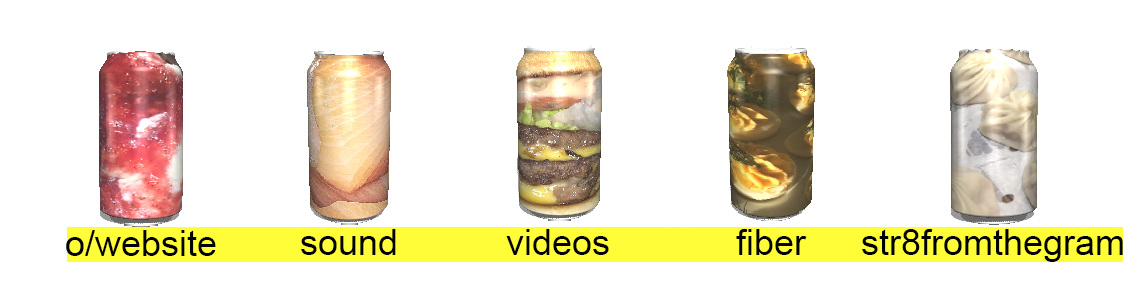
<style>
.page{position:relative;width:1147px;height:288px;background:#ffffff}
.page>*{position:absolute;margin:0}
.t1{font:36px "ArialMT";color:#000000}
</style>
<div class="page">
<p class="t1" style="left:66px;top:230px;width:150px;height:26px">o/website</p>
<p class="t1" style="left:301px;top:229px;width:95px;height:26px">sound</p>
<p class="t1" style="left:506px;top:229px;width:103px;height:26px">videos</p>
<p class="t1" style="left:736px;top:229px;width:71px;height:26px">fiber</p>
<p class="t1" style="left:862px;top:229px;width:261px;height:33px">str8fromthegram</p>
</div>
